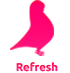
<style>
.page{position:relative;width:70px;height:73px;background:#ffffff}
.page>*{position:absolute;margin:0}
.t1{font:11.3px "Ubuntu-Bold"}
</style>
<div class="page">
<p class="t1" style="left:16px;top:62px;width:42px;height:10px">Refresh</p>
</div>
